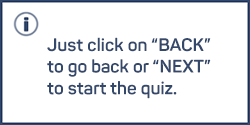
<style>
.page{position:relative;width:250px;height:125px;background:#ffffff}
.page>*{position:absolute;margin:0}
.t1{font:18px "Panton-Bold";color:#34486b}
</style>
<div class="page">
<p class="t1" style="left:47px;top:37px;width:164px;height:62px">Just click on “BACK”<br>to go back or “NEXT” <br>to start the quiz.</p>
</div>
